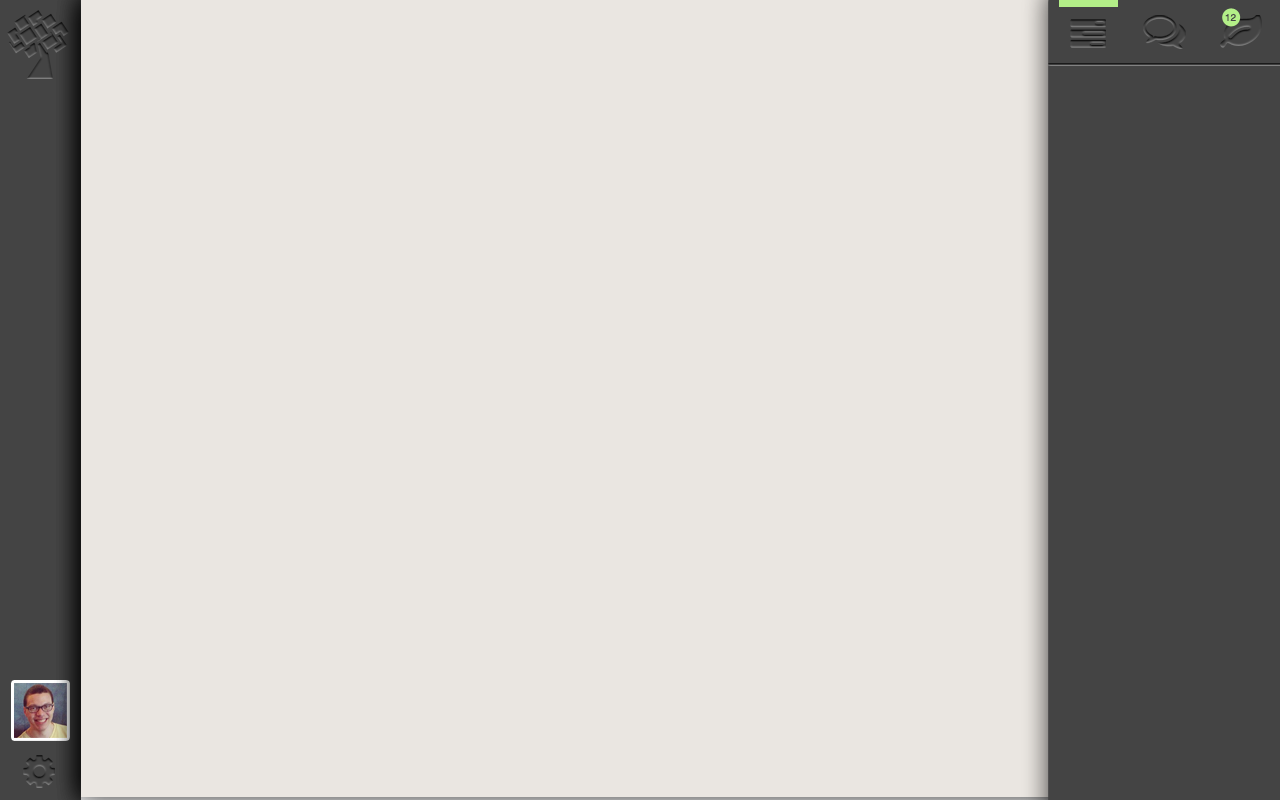
<style>
.page{position:relative;width:1280px;height:800px;background:#eae6e1}
.page>*{position:absolute;margin:0}
.t1{font:10px "Helvetica";color:#444444}
</style>
<div class="page">
<p class="t1" style="left:1225px;top:13px;width:11px;height:8px">12</p>
</div>
